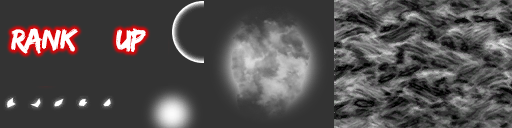
<style>
.page{position:relative;width:512px;height:128px;background:#333333}
.page>*{position:absolute;margin:0}
.t1{font:30px "EdoSZ";letter-spacing:-0.025em;color:#ffffff}
</style>
<div class="page">
<p class="t1" style="left:11px;top:28px;width:67px;height:26px">rank</p>
<p class="t1" style="left:116px;top:28px;width:30px;height:24px">UP</p>
</div>
